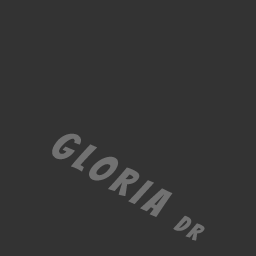
<style>
.page{position:relative;width:256px;height:256px;background:#333333}
.page>*{position:absolute;margin:0}
.t1{font:40px "Bangers-Regular";letter-spacing:0.16em;color:#717171}
.t2{font:24px "Bangers-Regular";letter-spacing:0.16em;color:#717171}
</style>
<div class="page">
<p class="t1" style="left:52px;top:133px;width:153px;height:108px;rotate:31deg">GLORIA <span class="t2">Dr</span></p>
</div>
